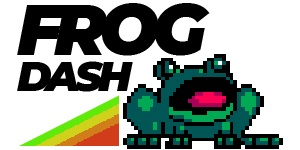
<style>
.page{position:relative;width:300px;height:150px;background:#ffffff}
.page>*{position:absolute;margin:0}
.t1{font:70.9px/52.7px "Montserrat-BlackItalic";letter-spacing:-0.11em;color:#000000}
.t2{font:41.7px/36px "Montserrat-BlackItalic";letter-spacing:-0.11em;color:#000000}
</style>
<div class="page">
<p class="t1" style="left:17px;top:3px;width:193px;height:89px">FROG<br><span class="t2">DASH</span></p>
</div>
